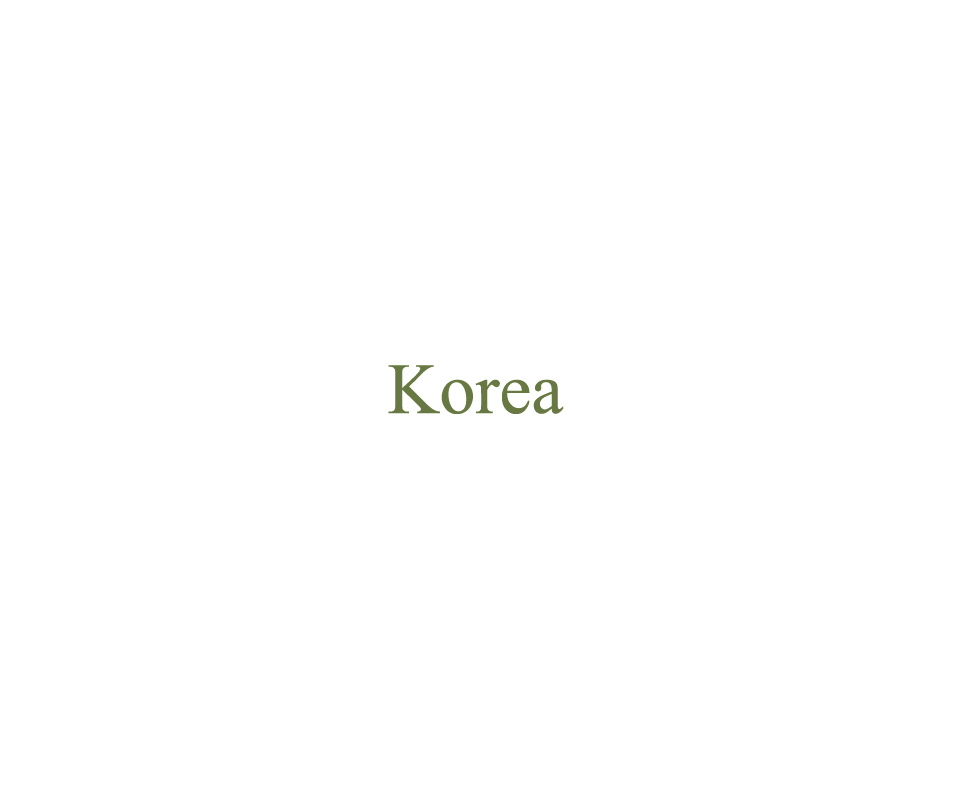
<style>
.page{position:relative;width:960px;height:800px;background:#ffffff}
.page>*{position:absolute;margin:0}
.t1{font:72px "TimesNewRomanPSMT";color:#677842}
</style>
<div class="page">
<p class="t1" style="left:388px;top:365px;width:176px;height:49px">Korea</p>
</div>
